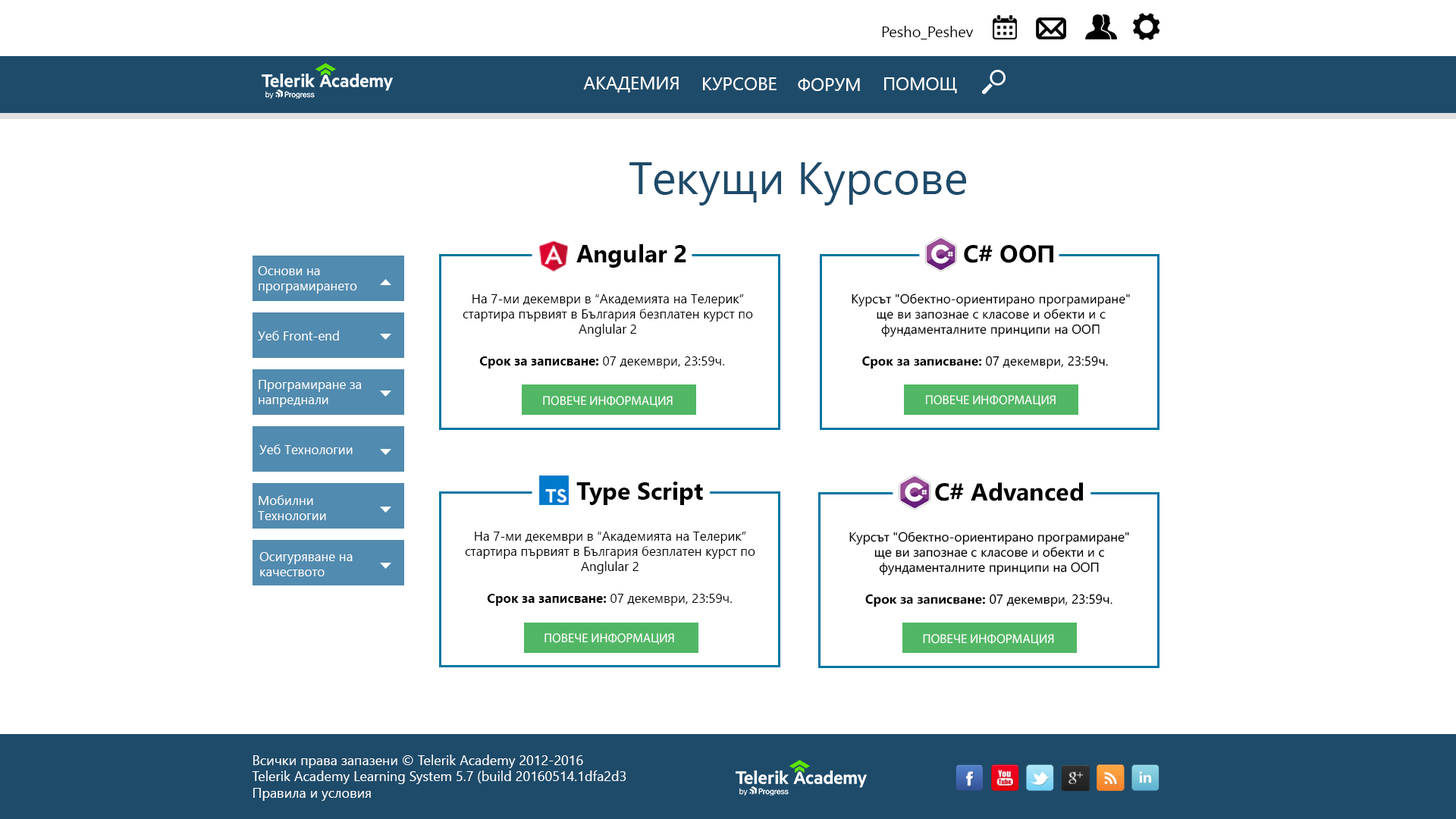
<style>
.page{position:relative;width:1456px;height:819px;background:#ffffff}
.page>*{position:absolute;margin:0}
.t1{font:15.2px "SegoeUI";color:#000000}
.t2{font:18.2px "SegoeUI";color:#ffffff}
.t3{font:45.5px "SegoeUI";color:#1e4b6a}
.t4{font:24.3px "SegoeUI-Bold";color:#000000}
.t5{font:12.9px "SegoeUI";color:#fefefe}
.t6{font:12.9px "SegoeUI";color:#000000}
.t7{font:12.9px "SegoeUI-Bold";color:#000000}
.t8{font:12.9px "MyriadPro-Regular";color:#ffffff}
.t9{font:12.9px "MyriadPro-Regular";color:#fefefe}
.t10{font:13.6px "SegoeUI";color:#ffffff}
</style>
<div class="page">
<p class="t1" style="left:882px;top:26px;width:92px;height:13px">Pesho_Peshev</p>
<p class="t2" style="left:583px;top:77px;width:96px;height:16px">АКАДЕМИЯ</p>
<p class="t2" style="left:703px;top:77px;width:74px;height:13px">КУРСОВЕ</p>
<p class="t2" style="left:884px;top:77px;width:73px;height:16px">ПОМОЩ</p>
<p class="t2" style="left:798px;top:78px;width:62px;height:13px">ФОРУМ</p>
<p class="t3" style="left:629px;top:162px;width:338px;height:44px">Текущи Kурсове</p>
<p class="t4" style="left:576px;top:244px;width:110px;height:24px">Angular 2</p>
<p class="t4" style="left:964px;top:245px;width:89px;height:18px">C# ООП</p>
<p class="t5" style="left:258px;top:266px;width:99px;height:27px;text-align:right">Основи на програмирането</p>
<p class="t6" style="left:852px;top:293px;width:278px;height:44px;text-align:center">Курсът "Обектно-ориентирано програмиране" ще ви запознае с класове и обекти и с фундаменталните принципи на ООП</p>
<p class="t6" style="left:463px;top:294px;width:290px;height:43px;text-align:center">На 7-ми декември в “Академията на Телерик” стартира първият в България безплатен курст по Anglular 2</p>
<p class="t5" style="left:258px;top:331px;width:81px;height:9px">Уеб Front-end</p>
<p class="t6" style="left:479px;top:356px;width:245px;height:13px"><span class="t7">Срок за записване: </span>07 декември, 23:59ч.</p>
<p class="t6" style="left:862px;top:356px;width:246px;height:13px"><span class="t7">Срок за записване: </span>07 декември, 23:59ч.</p>
<p class="t5" style="left:259px;top:380px;width:103px;height:27px;text-align:right">Програмиране за напреднали</p>
<p class="t8" style="left:543px;top:396px;width:130px;height:11px">ПОВЕЧЕ ИНФОРМАЦИЯ</p>
<p class="t9" style="left:926px;top:395px;width:130px;height:11px">ПОВЕЧЕ ИНФОРМАЦИЯ</p>
<p class="t5" style="left:259px;top:444px;width:94px;height:10px">Уеб Технологии</p>
<p class="t4" style="left:576px;top:482px;width:127px;height:23px">Type Script</p>
<p class="t4" style="left:935px;top:482px;width:148px;height:19px">C# Advanced</p>
<p class="t5" style="left:258px;top:495px;width:68px;height:25px;text-align:right">Мобилни <br>Технологии</p>
<p class="t6" style="left:465px;top:532px;width:290px;height:42px;text-align:center">На 7-ми декември в “Академията на Телерик” стартира първият в България безплатен курст по Anglular 2</p>
<p class="t6" style="left:849px;top:532px;width:280px;height:44px;text-align:center">Курсът "Обектно-ориентирано програмиране" ще ви запознае с класове и обекти и с фундаменталните принципи на ООП</p>
<p class="t5" style="left:259px;top:552px;width:94px;height:24px;text-align:right">Осигуряване на качеството</p>
<p class="t6" style="left:487px;top:594px;width:245px;height:12px"><span class="t7">Срок за записване: </span>07 декември, 23:59ч.</p>
<p class="t6" style="left:865px;top:594px;width:247px;height:13px"><span class="t7">Срок за записване: </span>07 декември, 23:59ч.</p>
<p class="t8" style="left:544px;top:633px;width:130px;height:12px">ПОВЕЧЕ ИНФОРМАЦИЯ</p>
<p class="t8" style="left:923px;top:634px;width:131px;height:11px">ПОВЕЧЕ ИНФОРМАЦИЯ</p>
<p class="t10" style="left:252px;top:755px;width:374px;height:46px;text-align:right">Всички права запазени © Telerik Academy 2012-2016<br>Telerik Academy Learning System 5.7 (build 20160514.1dfa2d3<br>Правила и условия</p>
</div>
